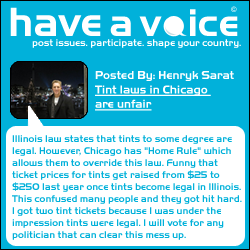
<style>
.page{position:relative;width:250px;height:250px;background:#01b1da}
.page>*{position:absolute;margin:0}
.t1{font:42.5px "HandelGotD-Bold";color:#ffffff}
.t2{font:40.3px "HandelGotD-Bold";color:#ffffff}
.t3{font:40.3px "HandelGotD-Bold";letter-spacing:0.025em;color:#ffffff}
.t4{font:10px "HandelGotD-Bold";color:#ffffff}
.t5{font:12px "HandelGotD-Bold";color:#ffffff;text-decoration:underline}
.t6{font:12px "HandelGotD-Bold";color:#ffffff}
.t7{font:10px "HandelGotD-Bold";color:#01b1da}
</style>
<div class="page">
<p class="t1" style="left:10px;top:7px;width:91px;height:29px">have</p>
<p class="t2" style="left:110px;top:9px;width:128px;height:27px">a <span class="t3">v  </span>ice</p>
<p class="t4" style="left:32px;top:39px;width:209px;height:9px">post issues. participate. shape your country.</p>
<p class="t5" style="left:95px;top:71px;width:139px;height:40px"><span class="t6">Posted By: Henryk Sarat<br></span>Tint laws in Chicago <br>are unfair</p>
<p class="t7" style="left:12px;top:135px;width:230px;height:105px">Illinois law states that tints to some degree are <br>legal. However, Chicago has "Home Rule" which <br>allows them to override this law. Funny that <br>ticket prices for tints get raised from $25 to <br>$250 last year once tints become legal in Illinois. <br>This confused many people and they got hit hard. <br>I got two tint tickets because I was under the <br>impression tints were legal. I will vote for any <br>politician that can clear this mess up.</p>
</div>
